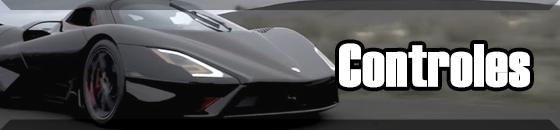
<style>
.page{position:relative;width:560px;height:130px}
.page>*{position:absolute;margin:0}
.t1{font:60px "Haettenschweiler";color:#ffffff;font-weight:bold}
</style>
<div class="page">
<p class="t1" style="left:339px;top:43px;width:191px;height:45px">Controles</p>
</div>
